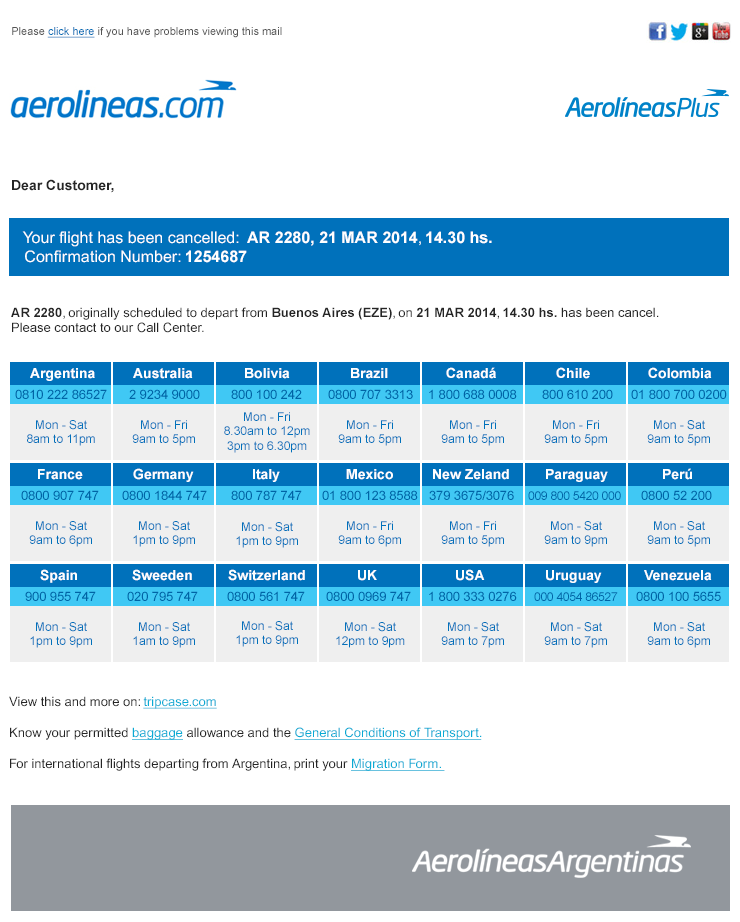
<style>
.page{position:relative;width:740px;height:922px;background:#ffffff}
.page>*{position:absolute;margin:0}
.t1{font:11px "ArialMT";color:#555555}
.t2{font:11px "ArialMT";color:#006eb5;text-decoration:underline}
.t3{font:13px "ArialMT";color:#252525}
.t4{font:14px "Arial-BoldMT";color:#252525}
.t5{font:16px "ArialMT";color:#ffffff}
.t6{font:16px "Arial-BoldMT";color:#ffffff}
.t7{font:13px "Arial-BoldMT";color:#252525}
.t8{font:14px "Arial-BoldMT";color:#ffffff}
.t9{font:13px "ArialMT";letter-spacing:-0.01em;color:#0064a6}
.t10{font:12px "ArialMT";color:#0071bb}
.t11{font:12px "ArialMT";letter-spacing:-0.02em;color:#0064a6}
.t12{font:13px "ArialMT";color:#08abd4;text-decoration:underline}
</style>
<div class="page">
<p class="t1" style="left:12px;top:27px;width:270px;height:11px">Please <span class="t2">click here </span>if you have problems viewing this mail</p>
<p class="t3" style="left:11px;top:179px;width:648px;height:154px"><span class="t4">Dear Customer, <br><br><br>   </span><span class="t5">Your flight has been cancelled:  </span><span class="t6">AR 2280, 21 MAR 2014</span><span class="t5">, </span><span class="t6">14.30 hs.<br></span><span class="t5">   Confirmation Number: </span><span class="t6">1254687 <br><br><br><br></span><span class="t7">AR 2280</span>, originally scheduled to depart from <span class="t7">Buenos Aires (EZE)</span>, on <span class="t7">21 MAR 2014</span>, <span class="t7">14.30 hs. </span>has been cancel.<br>Please contact to our Call Center.</p>
<p class="t8" style="left:30px;top:368px;width:65px;height:13px">Argentina</p>
<p class="t8" style="left:133px;top:368px;width:60px;height:11px">Australia</p>
<p class="t8" style="left:245px;top:368px;width:45px;height:11px">Bolivia</p>
<p class="t8" style="left:351px;top:368px;width:37px;height:11px">Brazil</p>
<p class="t8" style="left:446px;top:367px;width:50px;height:12px">Canadá</p>
<p class="t8" style="left:556px;top:367px;width:34px;height:12px">Chile</p>
<p class="t8" style="left:648px;top:367px;width:64px;height:12px">Colombia</p>
<p class="t9" style="left:15px;top:389px;width:92px;height:10px">0810 222 86527</p>
<p class="t9" style="left:129px;top:389px;width:71px;height:10px">2 9234 9000</p>
<p class="t9" style="left:231px;top:389px;width:71px;height:10px">800 100 242</p>
<p class="t9" style="left:328px;top:389px;width:85px;height:10px">0800 707 3313</p>
<p class="t9" style="left:429px;top:389px;width:88px;height:10px">1 800 688 0008</p>
<p class="t9" style="left:542px;top:389px;width:71px;height:10px">800 610 200</p>
<p class="t9" style="left:631px;top:389px;width:96px;height:10px">01 800 700 0200</p>
<p class="t10" style="left:224px;top:412px;width:86px;height:41px;text-align:center">Mon - Fri<br>8.30am to 12pm<br>3pm to 6.30pm</p>
<p class="t10" style="left:27px;top:420px;width:68px;height:26px;text-align:center">Mon - Sat<br>8am to 11pm</p>
<p class="t10" style="left:132px;top:420px;width:63px;height:26px;text-align:center">Mon - Fri<br>9am to 5pm</p>
<p class="t10" style="left:338px;top:420px;width:63px;height:26px;text-align:center">Mon - Fri<br>9am to 5pm</p>
<p class="t10" style="left:441px;top:420px;width:63px;height:26px;text-align:center">Mon - Fri<br>9am to 5pm</p>
<p class="t10" style="left:544px;top:420px;width:63px;height:26px;text-align:center">Mon - Fri<br>9am to 5pm</p>
<p class="t10" style="left:647px;top:420px;width:63px;height:26px;text-align:center">Mon - Sat<br>9am to 5pm</p>
<p class="t8" style="left:38px;top:469px;width:45px;height:11px">France</p>
<p class="t8" style="left:133px;top:468px;width:61px;height:14px">Germany</p>
<p class="t8" style="left:253px;top:469px;width:27px;height:13px">Italy</p>
<p class="t8" style="left:346px;top:469px;width:47px;height:11px">Mexico</p>
<p class="t8" style="left:433px;top:469px;width:76px;height:11px">New Zeland</p>
<p class="t8" style="left:546px;top:469px;width:62px;height:13px">Paraguay</p>
<p class="t8" style="left:663px;top:468px;width:29px;height:12px">Perú</p>
<p class="t9" style="left:21px;top:490px;width:78px;height:10px">0800 907 747</p>
<p class="t9" style="left:122px;top:490px;width:85px;height:10px">0800 1844 747</p>
<p class="t9" style="left:231px;top:490px;width:71px;height:10px">800 787 747</p>
<p class="t9" style="left:322px;top:490px;width:96px;height:10px">01 800 123 8588</p>
<p class="t9" style="left:429px;top:490px;width:85px;height:10px">379 3675/3076</p>
<p class="t11" style="left:528px;top:491px;width:93px;height:9px">009 800 5420 000</p>
<p class="t9" style="left:641px;top:490px;width:71px;height:10px">0800 52 200</p>
<p class="t10" style="left:29px;top:521px;width:63px;height:26px;text-align:center">Mon - Sat<br>9am to 6pm</p>
<p class="t10" style="left:133px;top:521px;width:62px;height:26px;text-align:center">Mon - Sat<br>1pm to 9pm</p>
<p class="t10" style="left:338px;top:521px;width:63px;height:26px;text-align:center">Mon - Fri<br>9am to 6pm</p>
<p class="t10" style="left:441px;top:521px;width:63px;height:26px;text-align:center">Mon - Fri<br>9am to 5pm</p>
<p class="t10" style="left:544px;top:521px;width:63px;height:26px;text-align:center">Mon - Sat<br>9am to 9pm</p>
<p class="t10" style="left:647px;top:521px;width:63px;height:26px;text-align:center">Mon - Sat<br>9am to 5pm</p>
<p class="t10" style="left:236px;top:522px;width:62px;height:26px;text-align:center">Mon - Sat<br>1pm to 9pm</p>
<p class="t8" style="left:40px;top:569px;width:37px;height:14px">Spain</p>
<p class="t8" style="left:132px;top:569px;width:60px;height:12px">Sweeden</p>
<p class="t8" style="left:228px;top:569px;width:77px;height:12px">Switzerland</p>
<p class="t8" style="left:456px;top:569px;width:29px;height:12px">USA</p>
<p class="t8" style="left:358px;top:570px;width:19px;height:11px">UK</p>
<p class="t8" style="left:546px;top:570px;width:56px;height:13px">Uruguay</p>
<p class="t8" style="left:644px;top:570px;width:68px;height:11px">Venezuela</p>
<p class="t9" style="left:25px;top:591px;width:71px;height:10px">900 955 747</p>
<p class="t9" style="left:127px;top:591px;width:71px;height:10px">020 795 747</p>
<p class="t9" style="left:227px;top:591px;width:78px;height:10px">0800 561 747</p>
<p class="t9" style="left:326px;top:591px;width:85px;height:10px">0800 0969 747</p>
<p class="t9" style="left:429px;top:591px;width:88px;height:10px">1 800 333 0276</p>
<p class="t11" style="left:534px;top:592px;width:84px;height:9px">000 4054 86527</p>
<p class="t9" style="left:636px;top:591px;width:85px;height:10px">0800 100 5655</p>
<p class="t10" style="left:30px;top:622px;width:62px;height:26px;text-align:center">Mon - Sat<br>1pm to 9pm</p>
<p class="t10" style="left:133px;top:622px;width:62px;height:26px;text-align:center">Mon - Sat<br>1am to 9pm</p>
<p class="t10" style="left:236px;top:621px;width:62px;height:26px;text-align:center">Mon - Sat<br>1pm to 9pm</p>
<p class="t10" style="left:336px;top:622px;width:69px;height:26px;text-align:center">Mon - Sat<br>12pm to 9pm</p>
<p class="t10" style="left:441px;top:622px;width:63px;height:26px;text-align:center">Mon - Sat<br>9am to 7pm</p>
<p class="t10" style="left:544px;top:622px;width:63px;height:26px;text-align:center">Mon - Sat<br>9am to 7pm</p>
<p class="t10" style="left:647px;top:622px;width:63px;height:26px;text-align:center">Mon - Sat<br>9am to 6pm</p>
<p class="t3" style="left:9px;top:696px;width:473px;height:75px">View this and more on: <span class="t12">tripcase.com<br><br></span>Know your permitted <span class="t12">baggage </span>allowance and the <span class="t12">General Conditions of Transport.<br><br></span>For international flights departing from Argentina, print your <span class="t12">Migration Form.</span></p>
</div>
